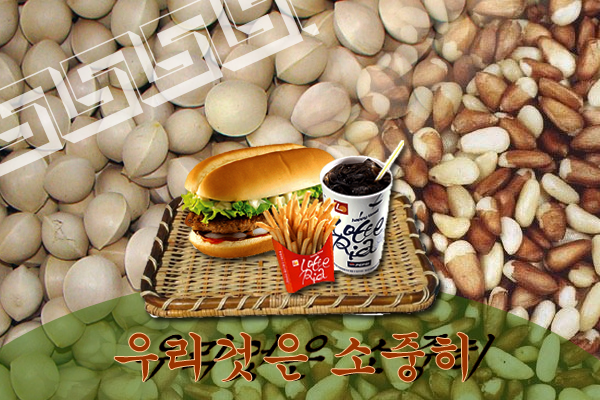
<style>
.page{position:relative;width:600px;height:400px}
.page>*{position:absolute;margin:0}
.t1{font:50px "Gungsuh";color:#993300}
</style>
<div class="page">
<p class="t1" style="left:114px;top:332px;width:354px;height:50px">우리것은 소중히</p>
</div>
